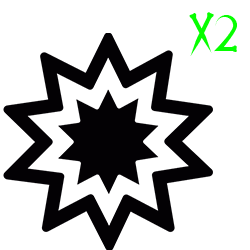
<style>
.page{position:relative;width:250px;height:250px;background:#ffffff}
.page>*{position:absolute;margin:0}
.t1{font:48px "DemonsandDarlings";color:#06ff00}
</style>
<div class="page">
<p class="t1" style="left:189px;top:12px;width:48px;height:44px">X2</p>
</div>
